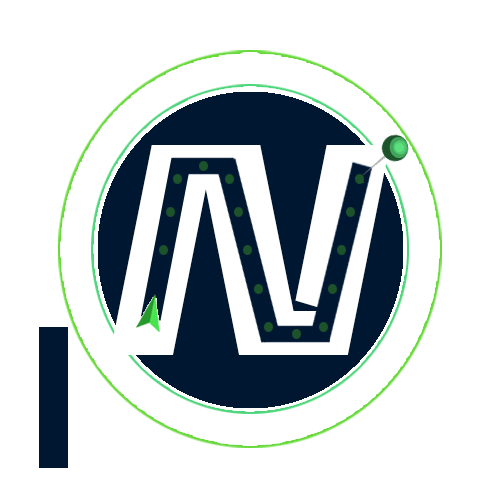
<style>
.page{position:relative;width:500px;height:500px;background:#ffffff}
.page>*{position:absolute;margin:0}
.t1{font:300px "RaceSportRegular";color:#ffffff}
</style>
<div class="page">
<p class="t1" style="left:109px;top:145px;width:281px;height:210px;rotate:180deg">N</p>
</div>
